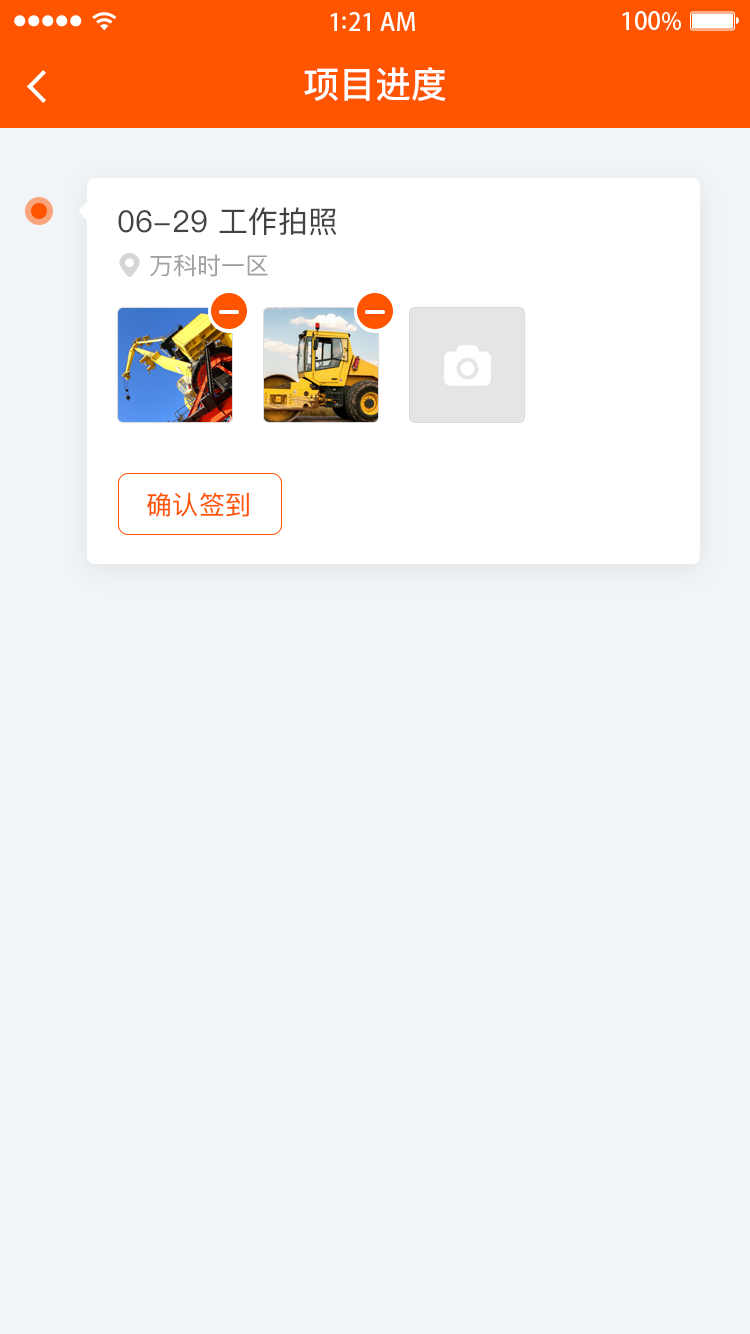
<style>
.page{position:relative;width:750px;height:1334px;background:#f2f5f7}
.page>*{position:absolute;margin:0}
.t1{font:36px "PingFangSC-Medium";color:#ffffff}
.t2{font:30px "PingFangSC-Regular";color:#434343}
.t3{font:24px "PingFangSC-Regular";color:#a0a0a0}
.t4{font:26px "PingFangSC-Regular";letter-spacing:0.02em;color:#ff5400}
</style>
<div class="page">
<p class="t1" style="left:304px;top:67px;width:142px;height:34px">项目进度</p>
<p class="t2" style="left:118px;top:207px;width:219px;height:29px">06-29 工作拍照</p>
<p class="t3" style="left:150px;top:254px;width:118px;height:23px">万科时一区</p>
<p class="t4" style="left:147px;top:492px;width:102px;height:25px">确认签到</p>
</div>
